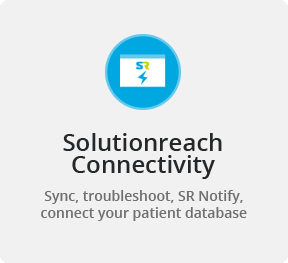
<style>
.page{position:relative;width:288px;height:263px;background:#f1f1f1}
.page>*{position:absolute;margin:0}
.t1{font:24px/22px "OpenSans-Semibold";color:#252729}
.t2{font:14px "OpenSans-Semibold";color:#6f6f6f}
</style>
<div class="page">
<p class="t1" style="left:63px;top:133px;width:159px;height:46px;text-align:center">Solutionreach<br>Connectivity</p>
<p class="t2" style="left:41px;top:190px;width:206px;height:31px;text-align:center">Sync, troubleshoot, SR Notify,<br>connect your patient database</p>
</div>
